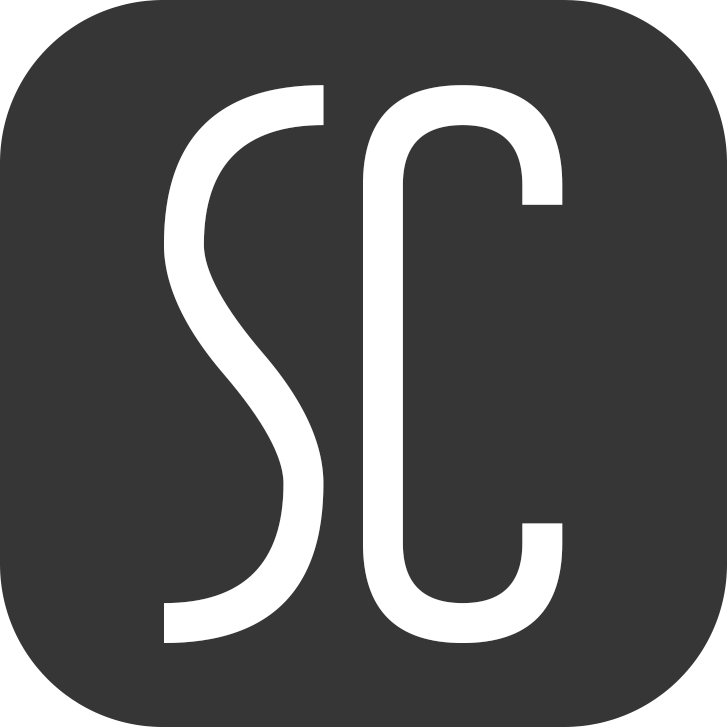
<style>
.page{position:relative;width:727px;height:727px;background:#363636}
.page>*{position:absolute;margin:0}
.t1{font:816.5px "StyleThief";color:#ffffff}
</style>
<div class="page">
<p class="t1" style="left:164px;top:85px;width:399px;height:558px">SC</p>
</div>
